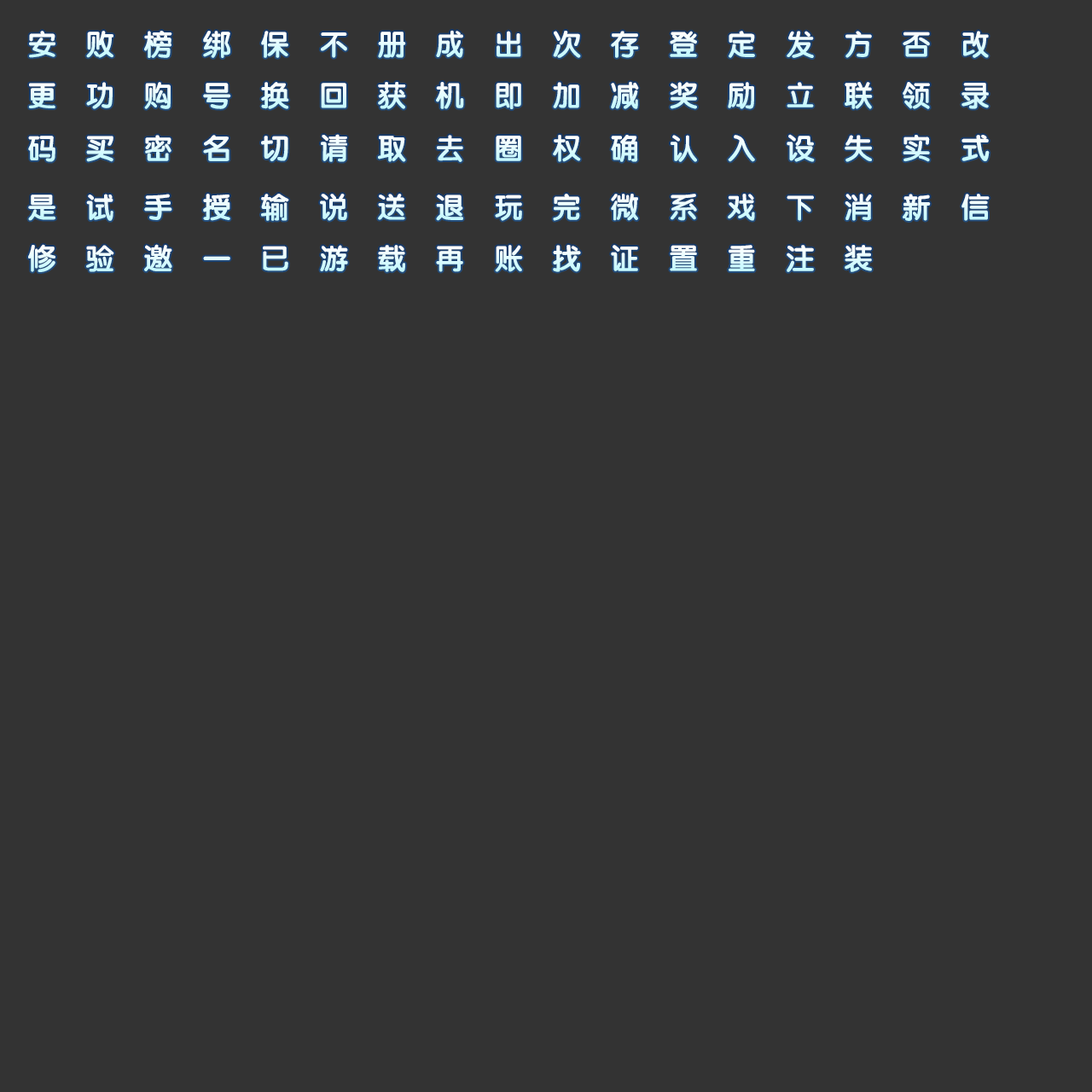
<style>
.page{position:relative;width:1092px;height:1092px;background:#333333}
.page>*{position:absolute;margin:0}
.t1{font:29px "FZY4JW--GB1-0";letter-spacing:1em}
</style>
<div class="page">
<p class="t1" style="left:29px;top:30px;width:960px;height:28px">安败榜绑保不册成出次存登定发方否改</p>
<p class="t1" style="left:28px;top:81px;width:961px;height:28px">更功购号换回获机即加减奖励立联领录</p>
<p class="t1" style="left:28px;top:134px;width:962px;height:28px">码买密名切请取去圈权确认入设失实式</p>
<p class="t1" style="left:28px;top:194px;width:962px;height:27px">是试手授输说送退玩完微系戏下消新信</p>
<p class="t1" style="left:28px;top:244px;width:844px;height:28px">修验邀一已游载再账找证置重注装</p>
</div>
